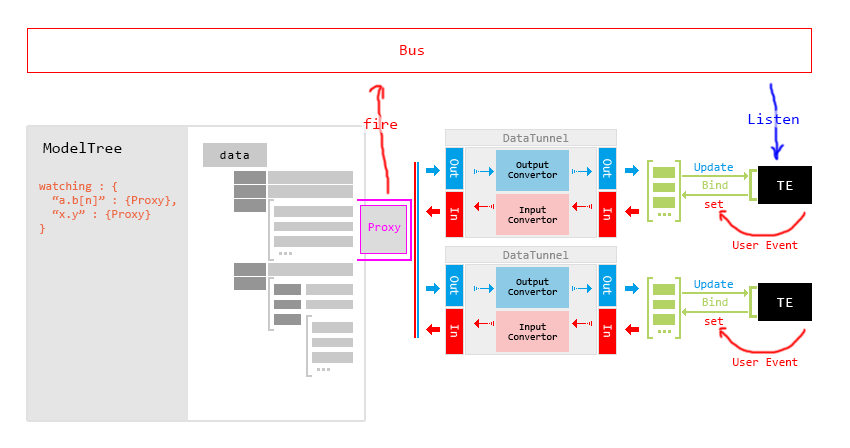
<style>
.page{position:relative;width:850px;height:448px;background:#ffffff}
.page>*{position:absolute;margin:0}
.t1{font:16px "Consolas";color:#ff0000}
.t2{font:16px "Consolas";color:#0000ff}
.t3{font:12px "Consolas";color:#898989}
.t4{font:16px "Consolas";color:#000000}
.t5{font:10px/10px "Consolas";color:#000000}
.t6{font:12px "Consolas";color:#00a0e9}
.t7{font:12px/14px "Consolas";color:#ec6941}
.t8{font:12px "Consolas";color:#b3d465}
.t9{font:12px "Consolas";color:#ff0000}
.t10{font:12px "Consolas";color:#ff00ff}
</style>
<div class="page">
<p class="t1" style="left:400px;top:45px;width:24px;height:10px">Bus</p>
<p class="t2" style="left:748px;top:113px;width:51px;height:11px">Listen</p>
<p class="t1" style="left:363px;top:118px;width:35px;height:11px">fire</p>
<p class="t3" style="left:503px;top:134px;width:66px;height:8px">DataTunnel</p>
<p class="t4" style="left:43px;top:142px;width:79px;height:11px">ModelTree</p>
<p class="t5" style="left:508px;top:161px;width:50px;height:17px;text-align:center">Output<br>Convertor</p>
<p class="t6" style="left:694px;top:163px;width:39px;height:10px">Update</p>
<p class="t7" style="left:39px;top:181px;width:137px;height:53px">watching : {<br>  “a.b[n]” : {Proxy},<br>  “x.y” : {Proxy}<br>}</p>
<p class="t8" style="left:702px;top:180px;width:26px;height:9px">Bind</p>
<p class="t5" style="left:508px;top:206px;width:50px;height:17px;text-align:center">Input<br>Convertor</p>
<p class="t9" style="left:705px;top:200px;width:18px;height:8px">set</p>
<p class="t10" style="left:368px;top:223px;width:33px;height:10px">Proxy</p>
<p class="t9" style="left:733px;top:241px;width:65px;height:8px">User Event</p>
<p class="t3" style="left:503px;top:251px;width:66px;height:8px">DataTunnel</p>
<p class="t5" style="left:508px;top:278px;width:50px;height:17px;text-align:center">Output<br>Convertor</p>
<p class="t6" style="left:694px;top:280px;width:39px;height:10px">Update</p>
<p class="t8" style="left:702px;top:297px;width:26px;height:9px">Bind</p>
<p class="t9" style="left:705px;top:317px;width:18px;height:8px">set</p>
<p class="t5" style="left:508px;top:323px;width:50px;height:17px;text-align:center">Input<br>Convertor</p>
<p class="t9" style="left:733px;top:358px;width:65px;height:8px">User Event</p>
</div>
